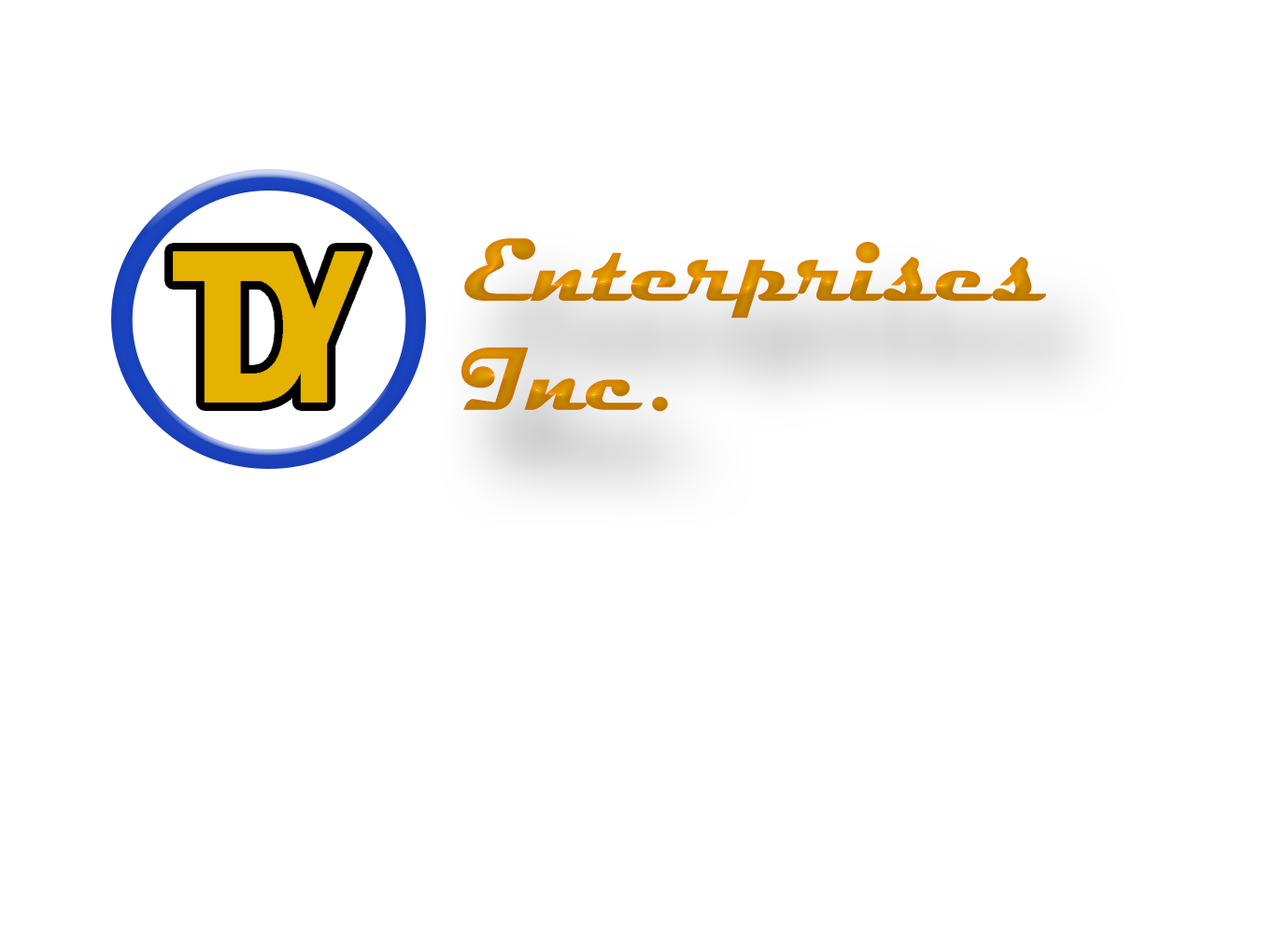
<style>
.page{position:relative;width:1276px;height:934px;background:#ffffff}
.page>*{position:absolute;margin:0}
.t1{font:90.8px "Magneto-Bold";color:#cc8300}
</style>
<div class="page">
<p class="t1" style="left:462px;top:238px;width:584px;height:174px">Enterprises <br> Inc.</p>
</div>
